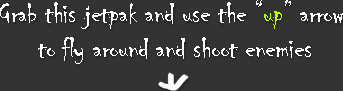
<style>
.page{position:relative;width:343px;height:91px;background:#333333}
.page>*{position:absolute;margin:0}
.t1{font:30.2px/35.2px "Chiller-Regular";color:#ffffff}
.t2{font:30.2px/35.2px "Chiller-Regular";color:#baff00}
</style>
<div class="page">
<p class="t1" style="left:0px;top:0px;width:343px;height:64px;text-align:center">Grab this jetpak and use the “<span class="t2">up</span>” arrow <br>to fly around and shoot enemies</p>
</div>
